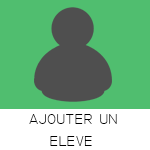
<style>
.page{position:relative;width:150px;height:150px;background:#50be6f}
.page>*{position:absolute;margin:0}
.t1{font:18px "TechnicLite";color:#000000}
</style>
<div class="page">
<p class="t1" style="left:29px;top:114px;width:88px;height:32px">ajouter un<br>   eleve</p>
</div>
